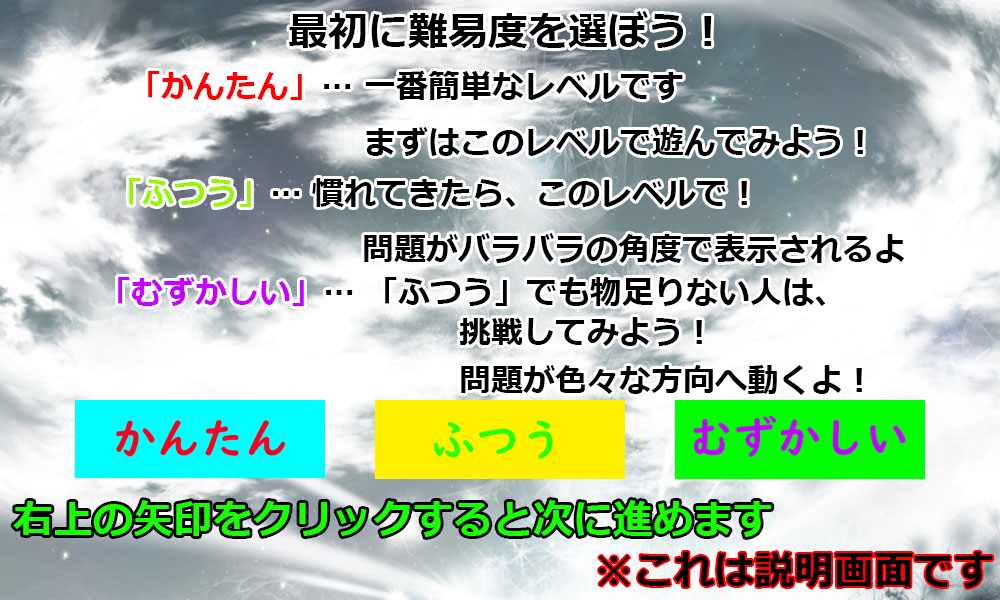
<style>
.page{position:relative;width:1000px;height:600px}
.page>*{position:absolute;margin:0}
.t1{font:40px "Meiryo-Bold";color:#000000}
.t2{font:32px "Meiryo-Bold";color:#000000}
.t3{font:32px "Meiryo-Bold";color:#ff0000}
.t4{font:32px "Meiryo-Bold";color:#98f700}
.t5{font:32px/48px "Meiryo-Bold";color:#000000}
.t6{font:32px/40px "Meiryo-Bold";color:#c700ff}
.t7{font:32px/40px "Meiryo-Bold";color:#000000}
.t8{font:40px "Meiryo-Bold";color:#18ff00}
</style>
<div class="page">
<p class="t1" style="left:289px;top:11px;width:423px;height:38px">最初に難易度を選ぼう！</p>
<p class="t2" style="left:148px;top:71px;width:715px;height:85px"><span class="t3">「かんたん」</span>… 一番簡単なレベルです<br>　　　　　　　 まずはこのレベルで遊んでみよう！</p>
<p class="t2" style="left:129px;top:178px;width:776px;height:85px"><span class="t4">「ふつう」</span>… 慣れてきたら、このレベルで！<br>       問題がバラバラの角度で表示されるよ</p>
<p class="t5" style="left:118px;top:277px;width:744px;height:118px"><span class="t6">「むずかしい」</span><span class="t7">… 「ふつう」でも物足りない人は、<br>          </span>挑戦してみよう！<br>          問題が色々な方向へ動くよ！</p>
<p class="t8" style="left:13px;top:500px;width:759px;height:37px">右上の矢印をクリックすると次に進めます</p>
<p class="t1" style="left:599px;top:552px;width:394px;height:36px">※これは説明画面です</p>
</div>
